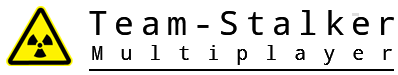
<style>
.page{position:relative;width:398px;height:75px;background:#ffffff}
.page>*{position:absolute;margin:0}
.t1{font:33px "DroidSansMono";letter-spacing:0.19em;color:#000000}
.t2{font:20px "DroidSansMono";letter-spacing:0.85em;color:#000000}
</style>
<div class="page">
<p class="t1" style="left:89px;top:10px;width:305px;height:25px">Team-Stalker</p>
<p class="t2" style="left:92px;top:45px;width:300px;height:20px">Multiplayer</p>
</div>
